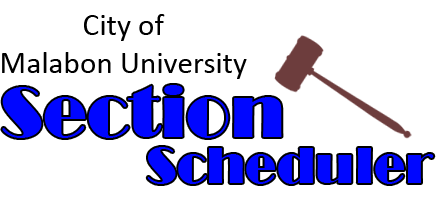
<style>
.page{position:relative;width:436px;height:200px;background:#ffffff}
.page>*{position:absolute;margin:0}
.t1{font:31.3px "Calibri";color:#000000}
.t2{font:72.9px "Broadway";color:#0006ff}
.t3{font:52.1px "Broadway";color:#0006ff}
</style>
<div class="page">
<p class="t1" style="left:2px;top:14px;width:245px;height:65px;text-align:center">City of <br>Malabon University</p>
<p class="t2" style="left:2px;top:85px;width:280px;height:53px">Section</p>
<p class="t3" style="left:147px;top:147px;width:287px;height:37px">Scheduler</p>
</div>
